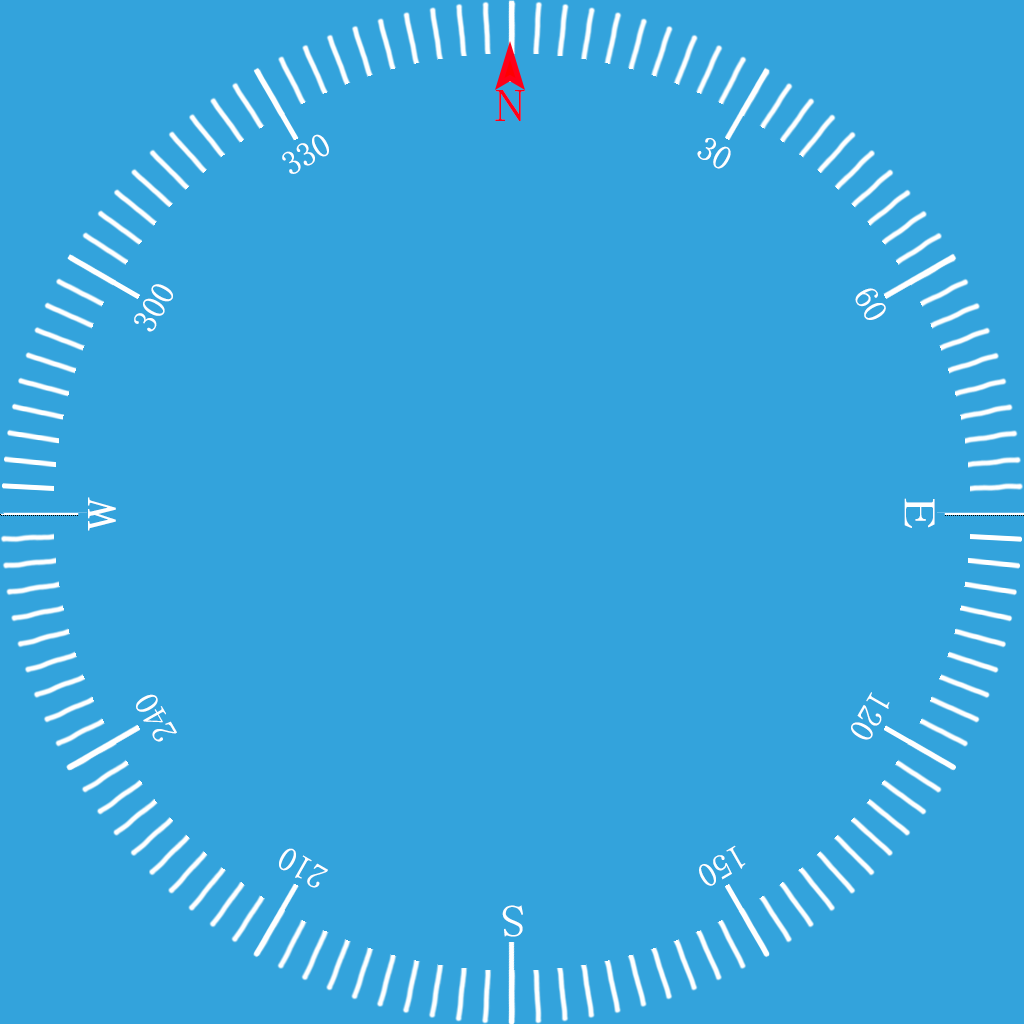
<style>
.page{position:relative;width:1024px;height:1024px;background:#33a3dc}
.page>*{position:absolute;margin:0}
.t1{font:46px "SimSun";color:#ff0018;scale:1.3 1}
.t2{font:33.7px "SimSun";color:#ffffff}
.t3{font:33.8px "SimSun";color:#ffffff}
.t4{font:41px "SimSun";color:#ffffff;scale:1.66 1}
.t5{font:44px "SimSun";color:#ffffff;scale:1.5 1}
.t6{font:45px "SimSun";color:#ffffff;scale:1.11 1}
</style>
<div class="page">
<p class="t1" style="left:495px;top:90px;width:30px;height:31px">N</p>
<p class="t2" style="left:282px;top:134px;width:47px;height:40px;rotate:-30deg">330</p>
<p class="t3" style="left:697px;top:138px;width:34px;height:31px;rotate:30deg">30</p>
<p class="t2" style="left:134px;top:284px;width:39px;height:48px;rotate:-60deg">300</p>
<p class="t2" style="left:855px;top:288px;width:31px;height:32px;rotate:60deg">60</p>
<p class="t4" style="left:88px;top:497px;width:28px;height:34px;rotate:-90deg">W</p>
<p class="t5" style="left:904px;top:498px;width:31px;height:30px;rotate:90deg">E</p>
<p class="t2" style="left:136px;top:694px;width:41px;height:48px;rotate:-120deg">240</p>
<p class="t2" style="left:851px;top:692px;width:39px;height:48px;rotate:120deg">120</p>
<p class="t2" style="left:699px;top:845px;width:47px;height:41px;rotate:150deg">150</p>
<p class="t2" style="left:279px;top:848px;width:49px;height:40px;rotate:-150deg">210</p>
<p class="t6" style="left:502px;top:905px;width:21px;height:32px;rotate:180deg">S</p>
</div>
